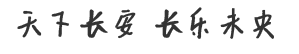
<style>
.page{position:relative;width:299px;height:54px;background:#ffffff}
.page>*{position:absolute;margin:0}
.t1{font:37.5px "-Regular";color:#333333;font-weight:bold}
</style>
<div class="page">
<p class="t1" style="left:17px;top:7px;width:257px;height:32px">天下长安 长乐未央</p>
</div>
